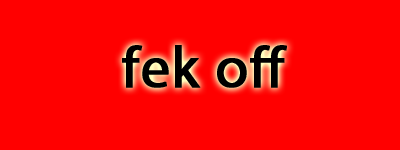
<style>
.page{position:relative;width:400px;height:150px;background:#ff0000}
.page>*{position:absolute;margin:0}
.t1{font:58px "MyriadPro-Regular";letter-spacing:0.01em;color:#000000;font-weight:bold}
</style>
<div class="page">
<p class="t1" style="left:122px;top:45px;width:165px;height:43px">fek off</p>
</div>
